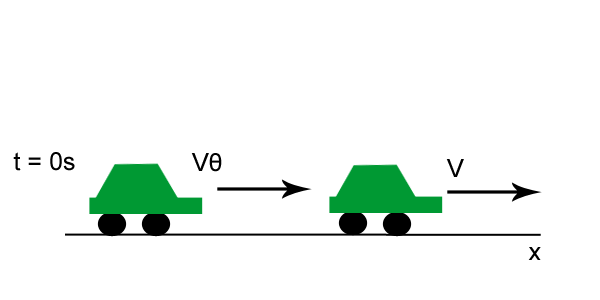
<style>
.page{position:relative;width:600px;height:300px;background:#ffffff}
.page>*{position:absolute;margin:0}
.t1{font:25px "ArialMT";color:#000000}
</style>
<div class="page">
<p class="t1" style="left:13px;top:152px;width:62px;height:19px">t = 0s</p>
<p class="t1" style="left:191px;top:153px;width:31px;height:19px">V0</p>
<p class="t1" style="left:446px;top:159px;width:18px;height:18px">V</p>
</div>
